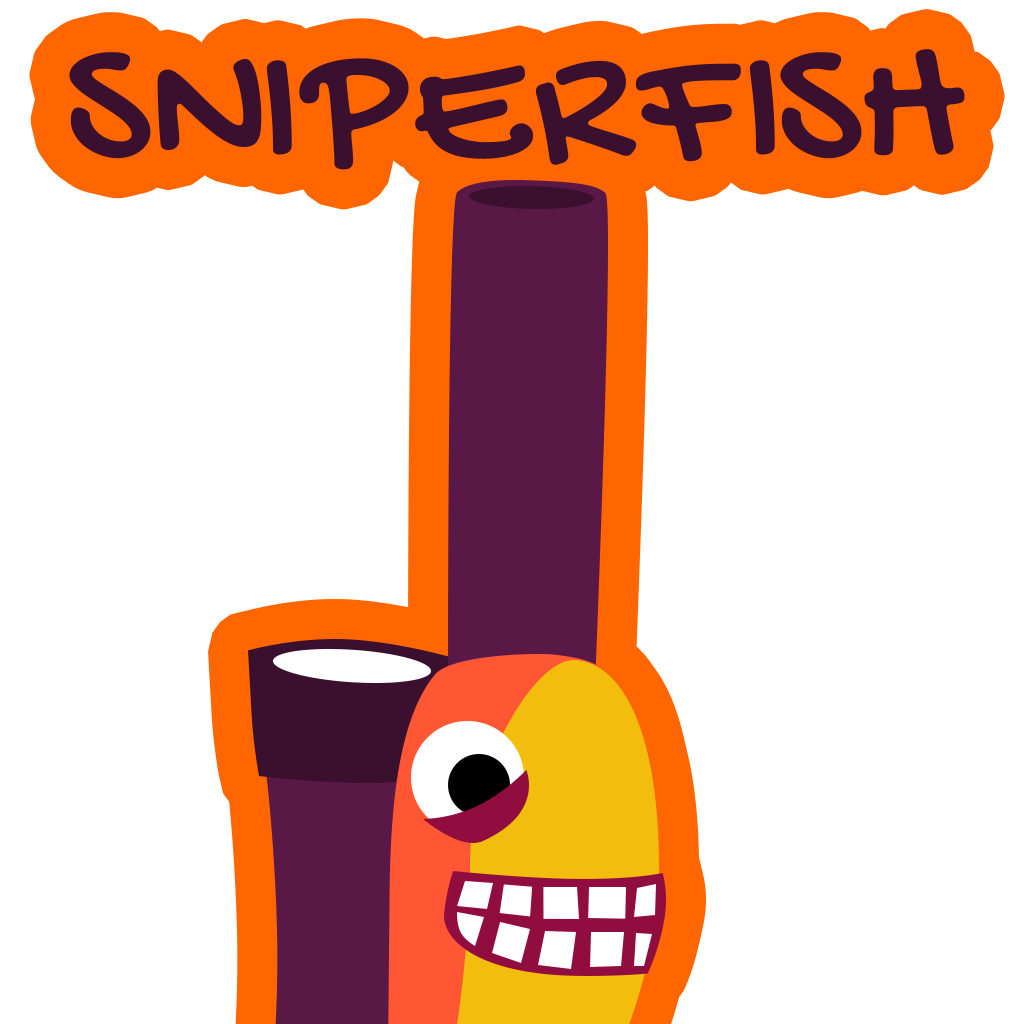
<style>
.page{position:relative;width:1024px;height:1024px;background:#ffffff}
.page>*{position:absolute;margin:0}
.t1{font:185.6px "GochiHandCyrillic";color:#3b102e}
</style>
<div class="page">
<p class="t1" style="left:69px;top:49px;width:896px;height:121px">SNIPERFISH</p>
</div>
